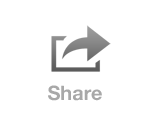
<style>
.page{position:relative;width:150px;height:130px;background:#ffffff}
.page>*{position:absolute;margin:0}
.t1{font:20px "AlteHaasGrotesk_Bold";color:#a8a8a8}
</style>
<div class="page">
<p class="t1" style="left:48px;top:85px;width:54px;height:16px">Share</p>
</div>
